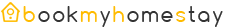
<style>
.page{position:relative;width:225px;height:28px;background:#ffffff}
.page>*{position:absolute;margin:0}
.t1{font:20px "Comfortaa";letter-spacing:0.11em;color:#333333}
.t2{font:20px "Comfortaa";letter-spacing:0.11em;color:#ffbb00}
</style>
<div class="page">
<p class="t1" style="left:23px;top:6px;width:200px;height:21px"><span class="t2">b</span>ook<span class="t2">m</span>y<span class="t2">h</span>ome<span class="t2">s</span>tay</p>
</div>
